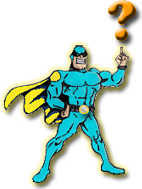
<style>
.page{position:relative;width:142px;height:189px;background:#ffffff}
.page>*{position:absolute;margin:0}
.t1{font:60px "CooperBlack"}
</style>
<div class="page">
<p class="t1" style="left:108px;top:0px;width:28px;height:41px">?</p>
</div>
